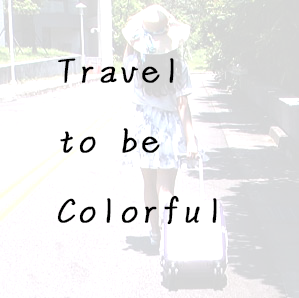
<style>
.page{position:relative;width:299px;height:298px;background:#ffffff}
.page>*{position:absolute;margin:0}
.t1{font:40px "DFYa-W3-WIN-BF";color:#000000;font-weight:bold}
</style>
<div class="page">
<p class="t1" style="left:57px;top:58px;width:160px;height:167px">Travel<br>to be<br>Colorful</p>
</div>
